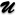
<style>
.page{position:relative;width:16px;height:16px}
.page>*{position:absolute;margin:0}
.t1{font:16px "BrushScriptStd";color:#000000;font-weight:bold}
</style>
<div class="page">
<p class="t1" style="left:0px;top:1px;width:15px;height:12px">U</p>
</div>
